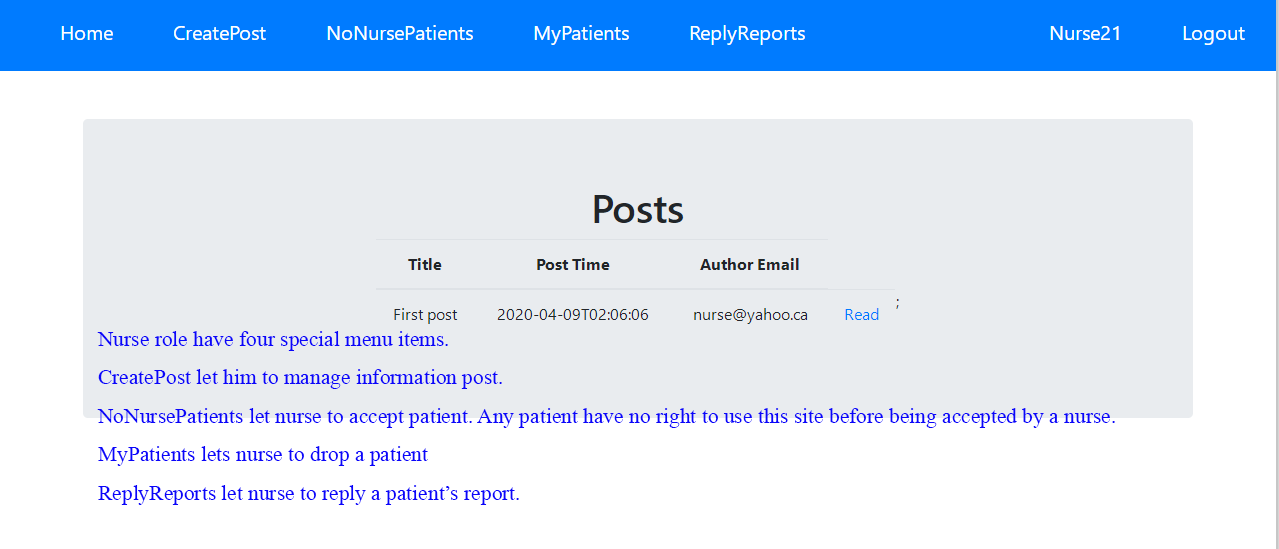
<style>
.page{position:relative;width:1279px;height:549px;background:#e9ecef}
.page>*{position:absolute;margin:0}
.t1{font:32px "Microsoft-Himalaya";color:#0b05fa}
</style>
<div class="page">
<p class="t1" style="left:97px;top:331px;width:1018px;height:174px">Nurse role have four special menu items. <br>CreatePost let him to manage information post. <br>NoNursePatients let nurse to accept patient. Any patient have no right to use this site before being accepted by a nurse.  <br>MyPatients lets nurse to drop a patient<br>ReplyReports let nurse to reply a patient’s report.</p>
</div>
